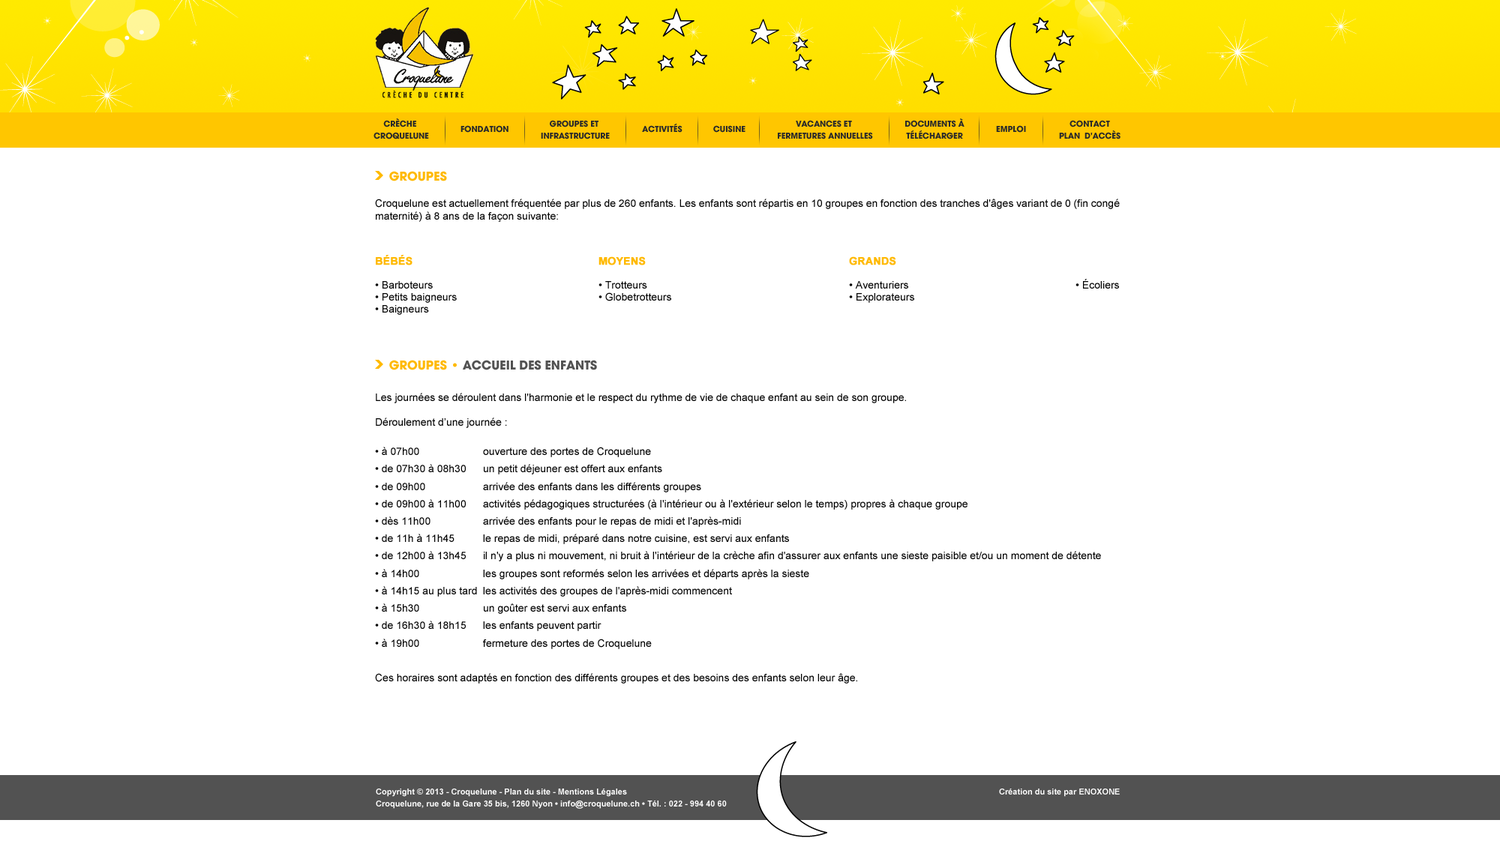
<style>
.page{position:relative;width:1500px;height:850px;background:#ffffff}
.page>*{position:absolute;margin:0}
.t1{font:9px/12.2px "AvantGard-Bold";color:#2a2a2a;text-transform:uppercase}
.t2{font:9px "AvantGard-Bold";color:#2a2a2a;text-transform:uppercase}
.t3{font:13.5px "AvantGard-Bold";color:#ffb900;text-transform:uppercase}
.t4{font:10.5px/12.2px "ArialMT";color:#000000}
.t5{font:10.5px/12.2px "Arial-BoldMT";color:#ffb900;text-transform:uppercase;font-weight:bold}
.t6{font:10.5px "ArialMT";color:#000000}
.t7{font:13.5px "AvantGard-Bold";color:#525252;text-transform:uppercase}
.t8{font:10.5px/17.4px "ArialMT";color:#000000}
.t9{font:8.2px/12.2px "Arial-BoldMT";color:#ffffff}
</style>
<div class="page">
<p class="t1" style="left:374px;top:118px;width:55px;height:22px;text-align:center">Crèche <br>Croquelune</p>
<p class="t2" style="left:460px;top:125px;width:48px;height:8px">Fondation</p>
<p class="t1" style="left:541px;top:120px;width:69px;height:20px;text-align:center">Groupes et <br>infrastructure</p>
<p class="t2" style="left:642px;top:123px;width:40px;height:10px">ACTIVITés</p>
<p class="t2" style="left:713px;top:125px;width:33px;height:8px">Cuisine</p>
<p class="t1" style="left:778px;top:120px;width:95px;height:20px;text-align:center">Vacances et <br>fermetures annuelles</p>
<p class="t1" style="left:905px;top:118px;width:59px;height:22px;text-align:center">DOCUMENTs à<br>télécharger</p>
<p class="t2" style="left:996px;top:125px;width:30px;height:8px">Emploi</p>
<p class="t1" style="left:1059px;top:120px;width:61px;height:20px;text-align:center">Contact<br>Plan  d'accès</p>
<p class="t3" style="left:389px;top:171px;width:58px;height:11px">Groupes</p>
<p class="t4" style="left:375px;top:199px;width:745px;height:23px;text-align:justify">Croquelune est actuellement fréquentée par plus de 260 enfants. Les enfants sont répartis en 10 groupes en fonction des tranches d'âges variant de 0 (fin congé maternité) à 8 ans de la façon suivante:</p>
<p class="t4" style="left:375px;top:255px;width:82px;height:60px;text-align:justify"><span class="t5">Bébés<br><br></span>• Barboteurs<br>• Petits baigneurs<br>• Baigneurs</p>
<p class="t4" style="left:598px;top:256px;width:73px;height:46px;text-align:justify"><span class="t5">Moyens<br><br></span>• Trotteurs<br>• Globetrotteurs</p>
<p class="t4" style="left:849px;top:256px;width:65px;height:47px;text-align:justify"><span class="t5">Grands<br><br></span>• Aventuriers<br>• Explorateurs</p>
<p class="t6" style="left:1076px;top:279px;width:43px;height:10px">• Écoliers</p>
<p class="t7" style="left:389px;top:360px;width:208px;height:10px"><span class="t3">Groupes • </span>accueil des enfants</p>
<p class="t8" style="left:375px;top:393px;width:726px;height:291px;text-align:justify"><span class="t4">Les journées se déroulent dans l'harmonie et le respect du rythme de vie de chaque enfant au sein de son groupe. <br><br>Déroulement d’une journée :<br><br>• à 07h00 </span>   ouverture des portes de Croquelune<br>• de 07h30 à 08h30 un petit déjeuner est offert aux enfants<br>• de 09h00   arrivée des enfants dans les différents groupes<br>• de 09h00 à 11h00 activités pédagogiques structurées (à l'intérieur ou à l'extérieur selon le temps) propres à chaque groupe<br>• dès 11h00  arrivée des enfants pour le repas de midi et l'après-midi<br>• de 11h à 11h45  le repas de midi, préparé dans notre cuisine, est servi aux enfants<br>• de 12h00 à 13h45  il n'y a plus ni mouvement, ni bruit à l'intérieur de la crèche afin d'assurer aux enfants une sieste paisible et/ou un moment de détente<br>• à 14h00    les groupes sont reformés selon les arrivées et départs après la sieste<br>• à 14h15 au plus tard les activités des groupes de l'après-midi commencent<br>• à 15h30   un goûter est servi aux enfants<br>• de 16h30 à 18h15 les enfants peuvent partir<br>• à 19h00   fermeture des portes de Croquelune<br><br>Ces horaires sont adaptés en fonction des différents groupes et des besoins des enfants selon leur âge.</p>
<p class="t9" style="left:376px;top:789px;width:744px;height:20px">Copyright © 2013 - Croquelune - Plan du site - Mentions Légales                                                             Création du site par ENOXONE<br>Croquelune, rue de la Gare 35 bis, 1260 Nyon • info@croquelune.ch • Tél. : 022 - 994 40 60</p>
</div>
